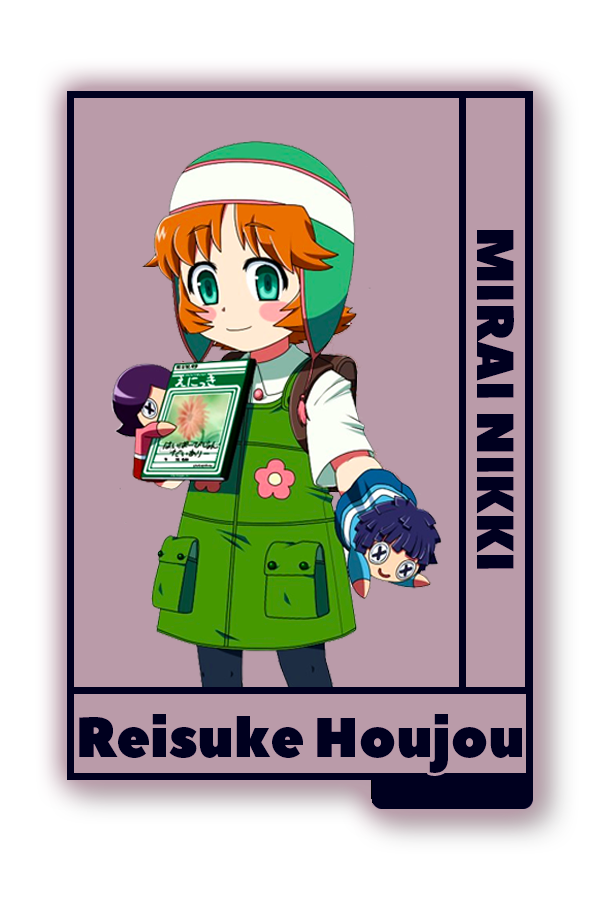
<style>
.page{position:relative;width:600px;height:900px;background:#ba9ba9}
.page>*{position:absolute;margin:0}
.t1{font:52px "PeaceSans";color:#00001b}
.t2{font:55.4px "PeaceSans";color:#00001b}
</style>
<div class="page">
<p class="t1" style="left:477px;top:230px;width:37px;height:339px;rotate:90deg">MIRAI NIKKI</p>
<p class="t2" style="left:79px;top:714px;width:443px;height:59px">Reisuke Houjou</p>
</div>
